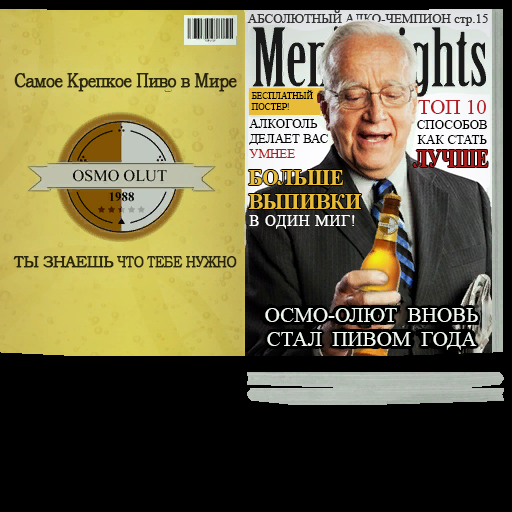
<style>
.page{position:relative;width:512px;height:512px;background:#000000}
.page>*{position:absolute;margin:0}
.t1{font:9px/11px "TimesNewRomanPSMT";color:#000000}
.t2{font:13px/15px "TimesNewRomanPSMT";color:#000000}
.t3{font:21px/15px "TimesNewRomanPSMT";color:#b01c20}
.t4{font:13px/15px "TimesNewRomanPSMT";color:#b01c18}
.t5{font:25.1px "TimesNewRomanPS-BoldMT";color:#a81e1c;scale:0.76 1}
.t6{font:23.1px/24px "TimesNewRomanPS-BoldMT";color:#e8bc38;scale:0.91 1}
.t7{font:16.5px "TimesNewRomanPSMT";letter-spacing:0.06em;color:#ffffff;scale:0.91 1}
.t8{font:21px/24px "TimesNewRomanPSMT";color:#f0f8f0}
</style>
<div class="page">
<p class="t1" style="left:251px;top:90px;width:62px;height:20px">БЕСПЛАТНЫЙ<br>ПОСТЕР!</p>
<p class="t2" style="left:417px;top:100px;width:70px;height:44px;text-align:center"><span class="t3">ТОП 10<br></span>СПОСОБОВ<br>КАК СТАТЬ</p>
<p class="t2" style="left:249px;top:119px;width:79px;height:39px">АЛКОГОЛЬ<br>ДЕЛАЕТ ВАС<br><span class="t4">УМНЕЕ</span></p>
<p class="t5" style="left:413px;top:150px;width:75px;height:17px">ЛУЧШЕ</p>
<p class="t6" style="left:248px;top:170px;width:113px;height:39px">БОЛЬШЕ<br>ВЫПИВКИ</p>
<p class="t7" style="left:249px;top:215px;width:106px;height:14px">В ОДИН МИГ!</p>
<p class="t8" style="left:265px;top:308px;width:213px;height:42px;text-align:center">ОСМО-ОЛЮТ  ВНОВЬ<br>СТАЛ  ПИВОМ  ГОДА</p>
</div>
